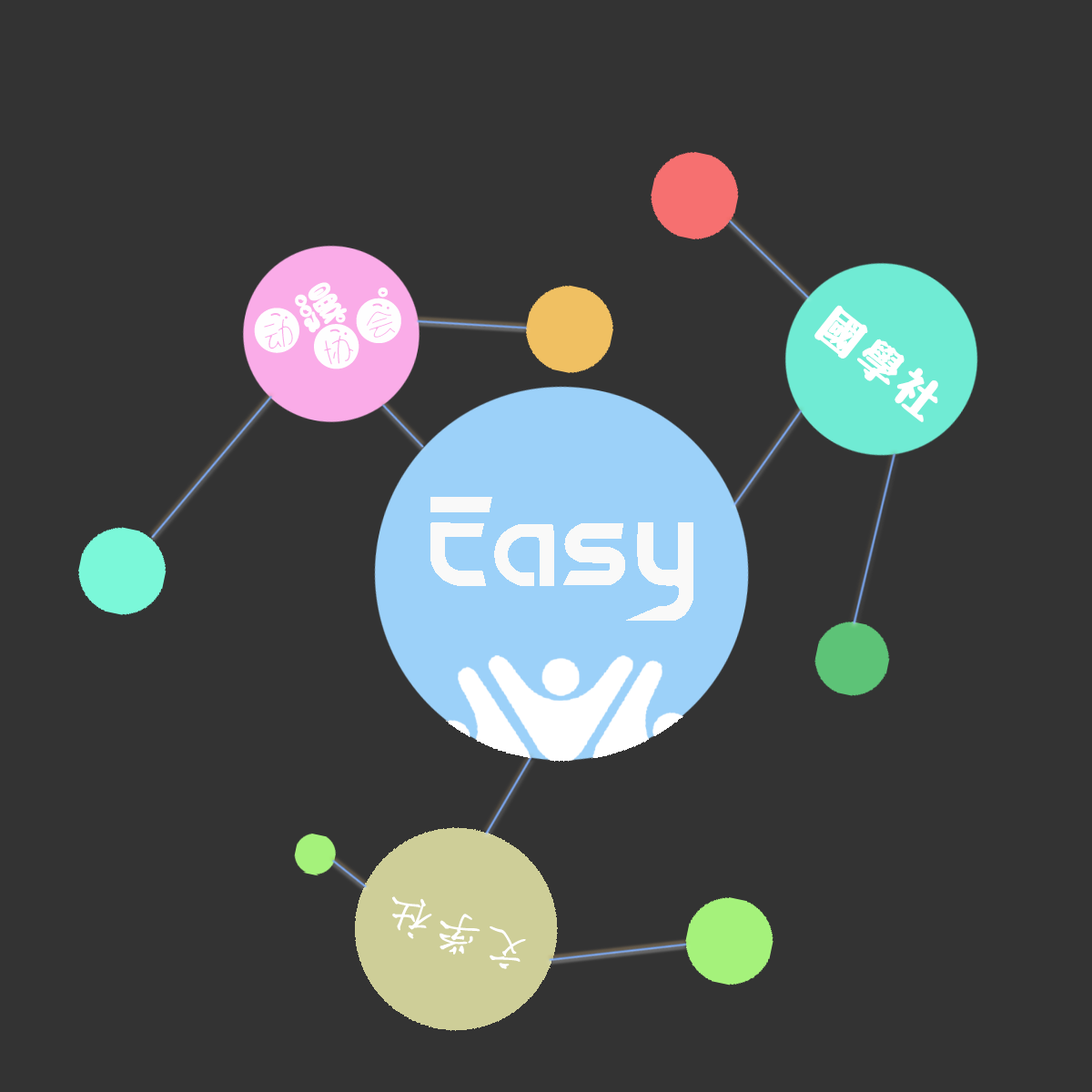
<style>
.page{position:relative;width:1092px;height:1092px;background:#333333}
.page>*{position:absolute;margin:0}
.t1{font:44.8px/34.2px "AaShuangYuzuo";letter-spacing:0.08em;color:#fefefe;text-transform:uppercase;font-weight:bold}
.t2{font:44.3px "¾­µä·±·ÂÔ² Regular";letter-spacing:0.08em;color:#ffffff;text-transform:uppercase;font-weight:bold}
.t3{font:47px "chaka";letter-spacing:0.08em;color:#ffffff;text-transform:uppercase;font-weight:bold}
</style>
<div class="page">
<p class="t1" style="left:254px;top:282px;width:147px;height:87px;text-align:center;rotate:-31deg">动漫<br>    协会</p>
<p class="t2" style="left:814px;top:305px;width:124px;height:117px;rotate:38deg">国学社</p>
<p class="t3" style="left:391px;top:896px;width:135px;height:73px;rotate:-161deg">文学社</p>
</div>
